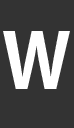
<style>
.page{position:relative;width:74px;height:128px;background:#333333}
.page>*{position:absolute;margin:0}
.t1{font:75px "AdobeGothicStd-Bold";color:#ffffff}
</style>
<div class="page">
<p class="t1" style="left:3px;top:31px;width:67px;height:58px">W</p>
</div>
